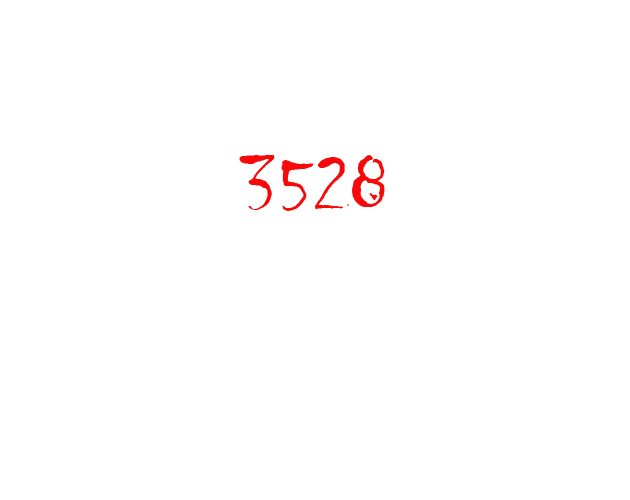
<style>
.page{position:relative;width:630px;height:500px;background:#ffffff}
.page>*{position:absolute;margin:0}
.t1{font:83.3px "Chiller-Regular";color:#f80909}
</style>
<div class="page">
<p class="t1" style="left:239px;top:155px;width:146px;height:56px">3528</p>
</div>
